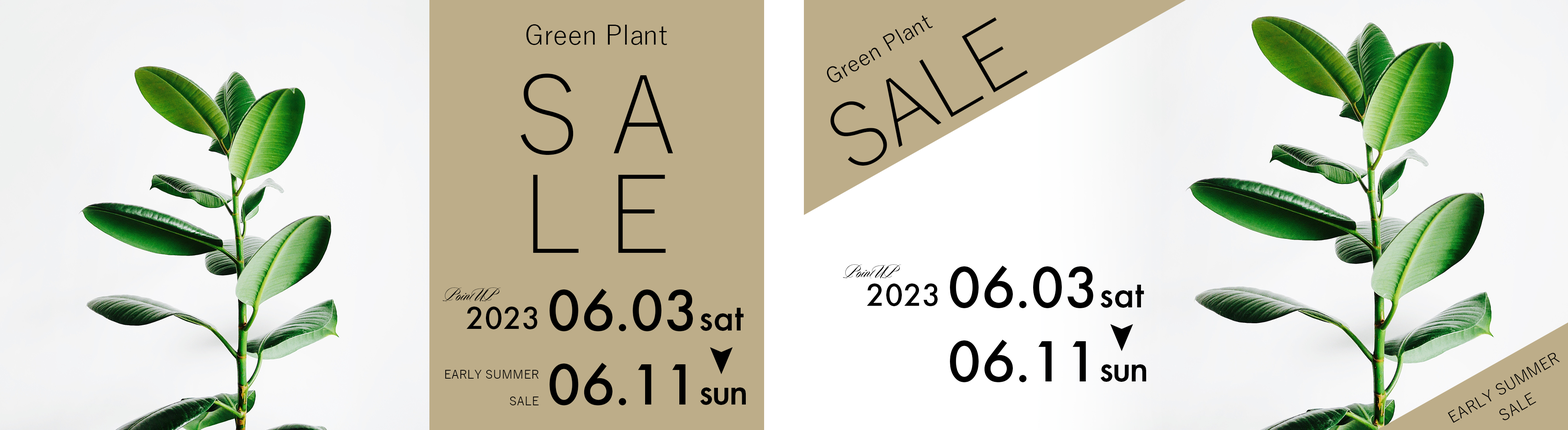
<style>
.page{position:relative;width:1568px;height:430px;background:#bdad89}
.page>*{position:absolute;margin:0}
.t1{font:22px "YuGothic-Regular";color:#000000}
.t2{font:87.7px "YuGothic-Light";color:#000000}
.t3{font:26.7px "YuGothic-Regular";color:#000000}
.t4{font:106.3px/99.5px "YuGothic-Light";color:#000000}
.t5{font:21.7px "DuendePro";color:#000000}
.t6{font:60.5px "FuturaPT-Medium";color:#000000}
.t7{font:39.8px "FuturaPT-Medium";color:#000000}
.t8{font:32.8px "FuturaPT-Medium";color:#000000}
.t9{font:15.8px "YuGothic-Regular";color:#000000}
.t10{font:11.9px "YuGothic-Regular";color:#000000}
</style>
<div class="page">
<p class="t1" style="left:827px;top:15px;width:106px;height:67px;rotate:-30deg">Green Plant</p>
<p class="t2" style="left:830px;top:17px;width:198px;height:149px;rotate:-30deg">SALE</p>
<p class="t3" style="left:526px;top:24px;width:141px;height:21px">Green Plant</p>
<p class="t4" style="left:521px;top:74px;width:152px;height:179px;text-align:center">SA<br>LE</p>
<p class="t5" style="left:843px;top:264px;width:58px;height:15px">Point UP</p>
<p class="t6" style="left:950px;top:265px;width:194px;height:43px">06.03<span class="t7">sat</span></p>
<p class="t5" style="left:443px;top:287px;width:58px;height:15px">Point UP</p>
<p class="t6" style="left:550px;top:289px;width:194px;height:43px">06.03<span class="t7">sat</span></p>
<p class="t8" style="left:867px;top:283px;width:71px;height:23px">2023</p>
<p class="t8" style="left:466px;top:306px;width:71px;height:23px">2023</p>
<p class="t6" style="left:950px;top:339px;width:196px;height:43px">06.11<span class="t7">sun</span></p>
<p class="t9" style="left:1448px;top:353px;width:112px;height:70px;rotate:-30deg">EARLY SUMMER</p>
<p class="t6" style="left:550px;top:363px;width:196px;height:43px">06.11<span class="t7">sun</span></p>
<p class="t10" style="left:445px;top:370px;width:93px;height:8px">EARLY SUMMER</p>
<p class="t10" style="left:510px;top:396px;width:29px;height:9px">SALE</p>
<p class="t9" style="left:1499px;top:392px;width:37px;height:28px;rotate:-30deg">SALE</p>
</div>
